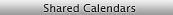
<style>
.page{position:relative;width:173px;height:15px}
.page>*{position:absolute;margin:0}
.t1{font:11px "LucidaGrande";color:#191919}
</style>
<div class="page">
<p class="t1" style="left:43px;top:4px;width:93px;height:8px">Shared Calendars</p>
</div>
